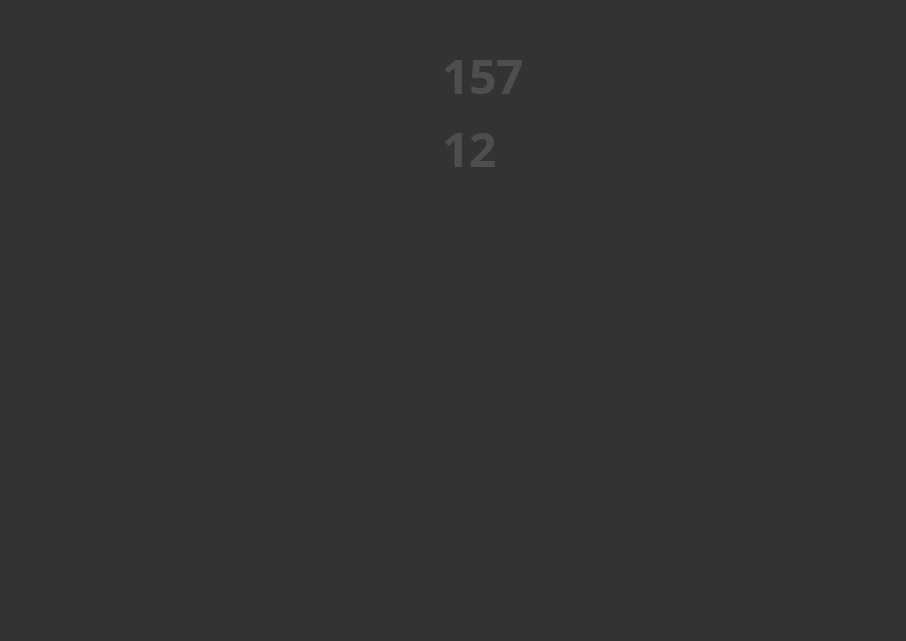
<style>
.page{position:relative;width:906px;height:641px;background:#333333}
.page>*{position:absolute;margin:0}
.t1{font:48px "OpenSans-Bold";color:#4e4e4e}
</style>
<div class="page">
<p class="t1" style="left:444px;top:60px;width:78px;height:34px">157</p>
<p class="t1" style="left:444px;top:133px;width:51px;height:34px">12</p>
</div>
